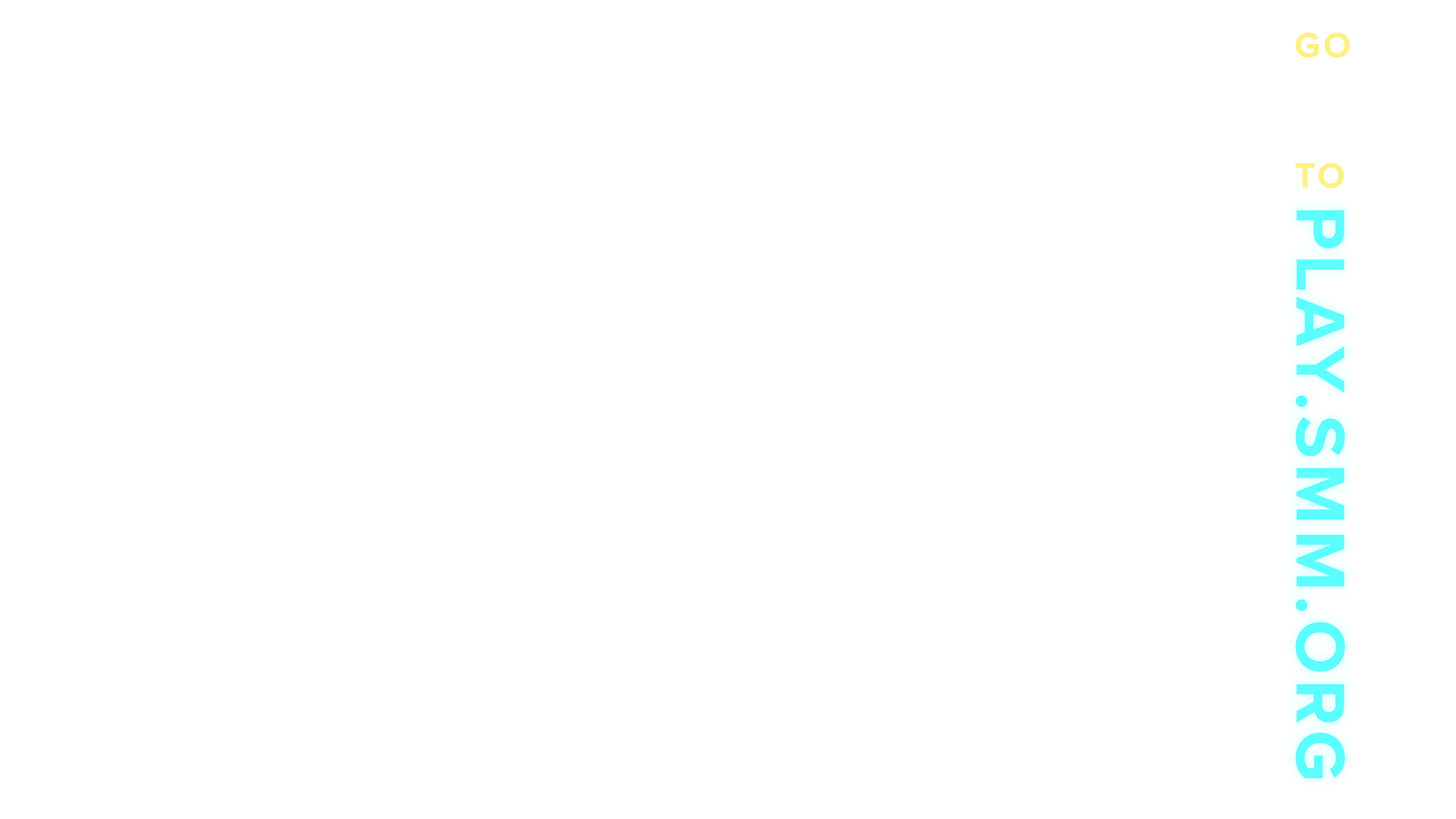
<style>
.page{position:relative;width:1456px;height:819px;background:#ffffff}
.page>*{position:absolute;margin:0}
.t1{font:36.3px "ProximaNova-Bold";letter-spacing:0.075em;color:#fdf085}
.t2{font:71.3px "ProximaNova-Bold";letter-spacing:0.075em;color:#5bfdfe}
.t3{font:45px "ProximaNova-Bold";letter-spacing:0.075em;color:#fdf085}
</style>
<div class="page">
<p class="t1" style="left:1295px;top:33px;width:56px;height:155px">GO<br><br><br>TO</p>
<p class="t2" style="left:1295px;top:210px;width:50px;height:569px;rotate:90deg"><span class="t3"><br></span>PLAY.SMM.ORG</p>
</div>
